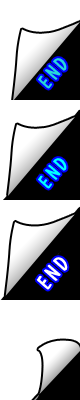
<style>
.page{position:relative;width:80px;height:400px;background:#ffffff}
.page>*{position:absolute;margin:0}
.t1{font:20.8px "DomCasualBT-Regular";letter-spacing:0.095em;color:#26d8d9}
.t2{font:20.8px "DomCasualBT-Regular";letter-spacing:0.095em;color:#00ffff}
.t3{font:22.2px "DomCasualBT-Regular";letter-spacing:0.095em;color:#ffffff}
</style>
<div class="page">
<p class="t1" style="left:38px;top:58px;width:29px;height:31px;rotate:-49deg">END</p>
<p class="t2" style="left:38px;top:158px;width:29px;height:31px;rotate:-49deg">END</p>
<p class="t3" style="left:36px;top:257px;width:32px;height:33px;rotate:-49deg">END</p>
</div>
